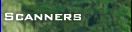
<style>
.page{position:relative;width:132px;height:32px}
.page>*{position:absolute;margin:0}
.t1{font:14px "BankGothicBT-Medium";color:#ffffff;font-weight:bold}
</style>
<div class="page">
<p class="t1" style="left:4px;top:12px;width:77px;height:9px">Scanners</p>
</div>
